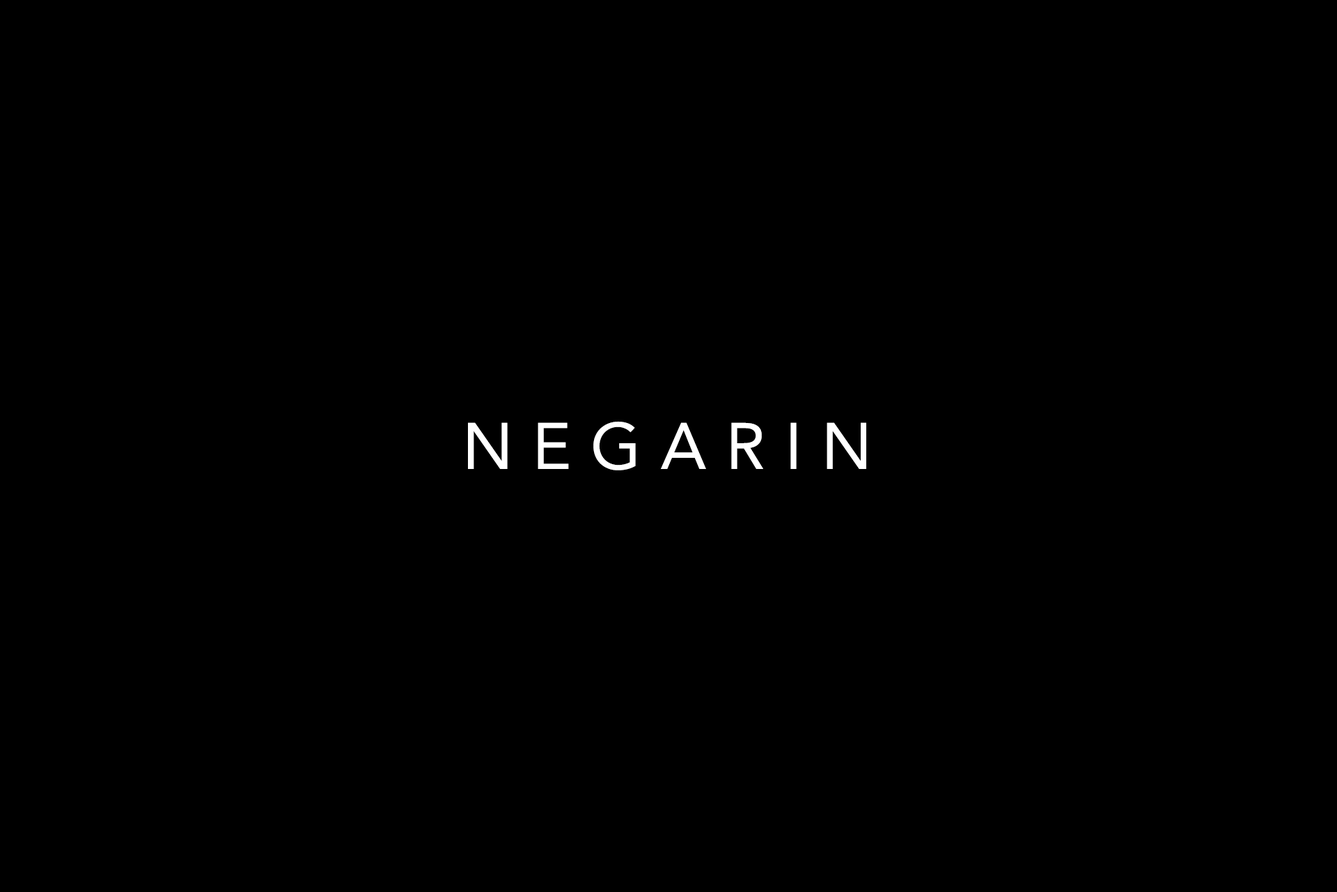
<style>
.page{position:relative;width:1337px;height:892px;background:#000000}
.page>*{position:absolute;margin:0}
.t1{font:65px "Avenir-Roman";letter-spacing:0.3em;color:#ffffff;text-transform:uppercase}
</style>
<div class="page">
<p class="t1" style="left:468px;top:421px;width:399px;height:49px">NEGARIN</p>
</div>
